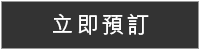
<style>
.page{position:relative;width:200px;height:50px;background:#333333}
.page>*{position:absolute;margin:0}
.t1{font:22.9px "MHeiHK-Bold";letter-spacing:0.1em;color:#ffffff}
</style>
<div class="page">
<p class="t1" style="left:53px;top:13px;width:96px;height:22px">立即預訂</p>
</div>
